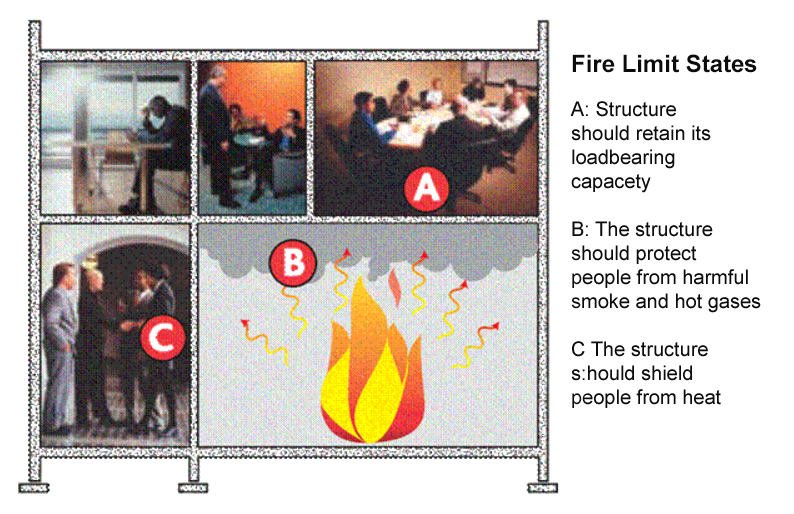
<style>
.page{position:relative;width:794px;height:514px;background:#ffffff}
.page>*{position:absolute;margin:0}
.t1{font:24px "Arial-BoldMT";color:#0c0c0c}
.t2{font:20px "ArialMT";color:#0c0c0c}
</style>
<div class="page">
<p class="t1" style="left:572px;top:54px;width:185px;height:19px">Fire Limit States</p>
<p class="t2" style="left:570px;top:101px;width:191px;height:307px">A: Structure<br>should retain its<br>loadbearing<br>capacety<br><br>B: The structure<br>should protect<br>people from harmful<br>smoke and hot gases<br><br>C The structure<br>s:hould shield<br>people from heat</p>
</div>
